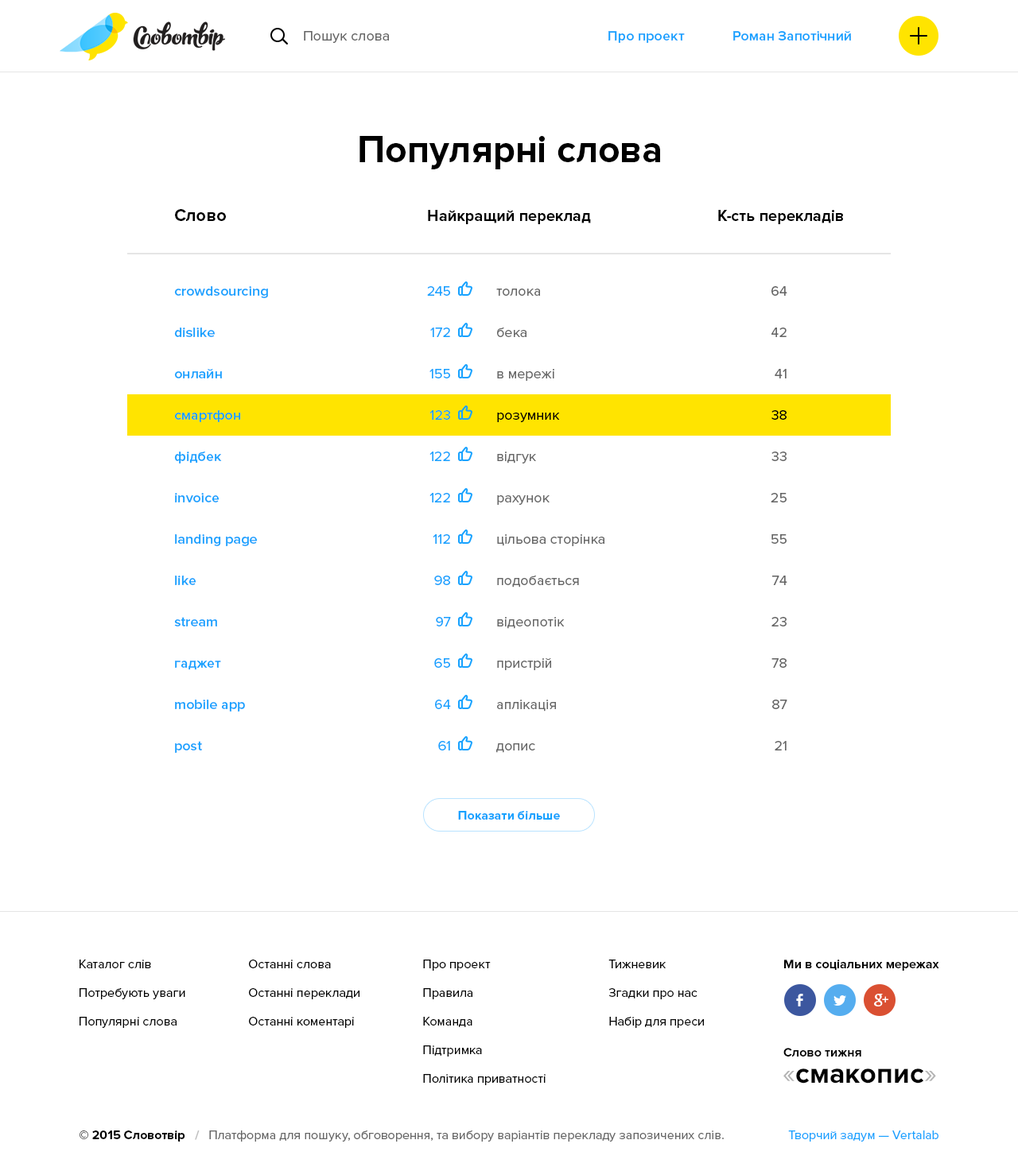
<style>
.page{position:relative;width:1018px;height:1171px;background:#ffffff}
.page>*{position:absolute;margin:0}
.t1{font:14.3px "ProximaNova-Regular";color:#666666}
.t2{font:14.3px "ProximaNova-Semibold";color:#17a2ff}
.t3{font:38.2px "ProximaNova-Bold";color:#000000}
.t4{font:17.5px "ProximaNova-Bold";color:#000000}
.t5{font:15.9px "ProximaNova-Bold";color:#000000}
.t6{font:14.3px/41.4px "ProximaNova-Semibold";color:#17a2ff}
.t7{font:14.3px/41.4px "ProximaNova-Regular";color:#17a2ff}
.t8{font:14.3px/41.4px "ProximaNova-Regular";color:#666666}
.t9{font:14.3px/41.4px "ProximaNova-Regular";color:#000000}
.t10{font:12.7px "ProximaNova-Bold";color:#17a2ff}
.t11{font:12.7px/28.6px "ProximaNova-Regular";color:#000000}
.t12{font:12.7px/28.6px "ProximaNova-Regular";color:#010101}
.t13{font:12.7px "ProximaNova-Bold";color:#010101}
.t14{font:28.6px "ProximaNova-Bold";color:#000000}
.t15{font:28.6px "ProximaNova-Regular";color:#b3b3b3}
.t16{font:12.7px "ProximaNova-Regular";color:#666666}
.t17{font:12.7px "ProximaNova-Bold";color:#000000}
.t18{font:12.7px "ProximaNova-Bold";color:#bfbfbf}
.t19{font:12.7px "ProximaNova-Regular";color:#17a2ff}
</style>
<div class="page">
<p class="t1" style="left:304px;top:31px;width:85px;height:12px">Пошук слова</p>
<p class="t2" style="left:608px;top:31px;width:77px;height:12px">Про проект</p>
<p class="t2" style="left:733px;top:31px;width:118px;height:10px">Роман Запотічний</p>
<p class="t3" style="left:359px;top:136px;width:301px;height:33px">Популярні слова</p>
<p class="t4" style="left:175px;top:209px;width:51px;height:12px">Слово</p>
<p class="t5" style="left:428px;top:210px;width:163px;height:14px">Найкращий переклад</p>
<p class="t5" style="left:718px;top:210px;width:125px;height:14px">К-сть перекладів</p>
<p class="t6" style="left:174px;top:286px;width:94px;height:467px">crowdsourcing<br>dislike<br>онлайн<br>смартфон<br>фідбек<br>invoice<br>landing page<br>like<br>stream<br>гаджет<br>mobile app<br>post</p>
<p class="t7" style="left:427px;top:286px;width:24px;height:465px;text-align:right">245<br>172<br>155<br>123<br>122<br>122<br>112<br>98<br>97<br>65<br>64<br>61</p>
<p class="t8" style="left:496px;top:289px;width:108px;height:464px">толока<br>бека<br>в мережі<br><span class="t9">розумник<br></span>відгук<br>рахунок<br>цільова сторінка<br>подобається<br>відеопотік<br>пристрій<br>аплікація<br>допис</p>
<p class="t8" style="left:771px;top:286px;width:16px;height:465px;text-align:right">64<br>42<br>41<br><span class="t9">38<br></span>33<br>25<br>55<br>74<br>23<br>78<br>87<br>21</p>
<p class="t10" style="left:458px;top:811px;width:102px;height:9px">Показати більше</p>
<p class="t11" style="left:80px;top:960px;width:105px;height:68px">Каталог слів<br>Потребують уваги<br>Популярні слова</p>
<p class="t11" style="left:249px;top:960px;width:110px;height:68px">Останні слова<br>Останні переклади<br>Останні коментарі</p>
<p class="t11" style="left:423px;top:960px;width:123px;height:126px">Про проект<br>Правила<br>Команда<br>Підтримка<br>Політика приватності</p>
<p class="t12" style="left:608px;top:960px;width:96px;height:68px">Тижневик<br>Згадки про нас<br>Набір для преси</p>
<p class="t13" style="left:784px;top:960px;width:155px;height:11px">Ми в соціальних мережах</p>
<p class="t13" style="left:783px;top:1048px;width:78px;height:9px">Слово тижня</p>
<p class="t14" style="left:783px;top:1069px;width:153px;height:15px"><span class="t15">«</span>смакопис<span class="t15">»</span></p>
<p class="t16" style="left:80px;top:1131px;width:644px;height:11px"><span class="t17">© 2015 Словотвір   </span><span class="t18">/   </span>Платформа для пошуку, обговорення, та вибору варіантів перекладу запозичених слів.</p>
<p class="t19" style="left:788px;top:1131px;width:150px;height:11px">Творчий задум — Vertalab</p>
</div>
